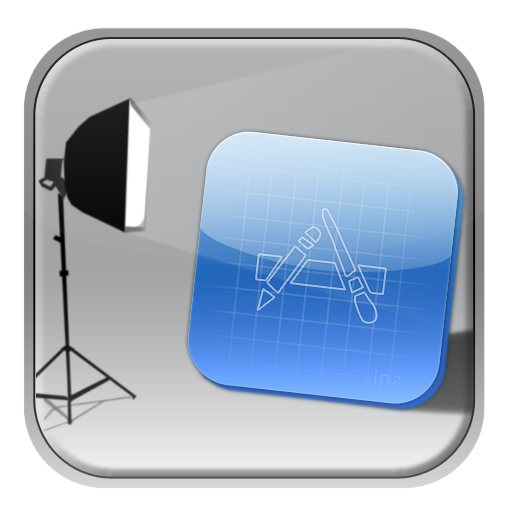
<style>
.page{position:relative;width:512px;height:512px;background:#ffffff}
.page>*{position:absolute;margin:0}
.t1{font:24.6px "Calibri";color:#7cb0ff}
</style>
<div class="page">
<p class="t1" style="left:373px;top:369px;width:29px;height:21px;rotate:6deg">ipa</p>
</div>
